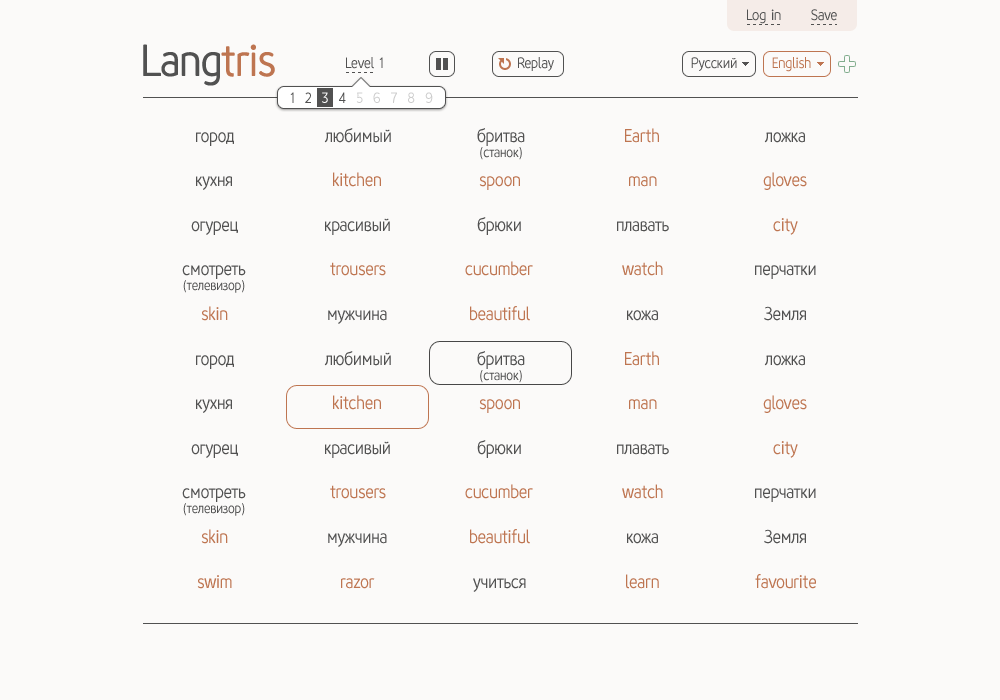
<style>
.page{position:relative;width:1000px;height:700px;background:#fbfaf9}
.page>*{position:absolute;margin:0}
.t1{font:17px "flexy";letter-spacing:-0.015em;color:#515151;scale:0.95 1}
.t2{font:51px "flexy";letter-spacing:-0.015em;color:#515151;scale:0.95 1}
.t3{font:51px "flexy";letter-spacing:-0.015em;color:#be7551;scale:0.95 1}
.t4{font:17px "flexy";letter-spacing:-0.015em;color:#be7551;scale:0.95 1}
.t5{font:21px "flexy";letter-spacing:-0.015em;color:#515151;scale:0.95 1}
.t6{font:16px/15px "flexy";letter-spacing:-0.015em;color:#515151;scale:0.95 1}
.t7{font:21px/25px "flexy";letter-spacing:-0.015em;color:#515151;scale:0.95 1}
.t8{font:21px "flexy";letter-spacing:-0.015em;color:#be7551;scale:0.95 1}
</style>
<div class="page">
<p class="t1" style="left:747px;top:9px;width:90px;height:15px">Log in      Save</p>
<p class="t2" style="left:143px;top:44px;width:132px;height:42px">Lang<span class="t3">tris</span></p>
<p class="t1" style="left:346px;top:57px;width:37px;height:12px">Level 1</p>
<p class="t1" style="left:518px;top:57px;width:36px;height:14px">Replay</p>
<p class="t1" style="left:691px;top:57px;width:120px;height:15px">Русский  <span class="t4">     English</span></p>
<p class="t5" style="left:196px;top:132px;width:38px;height:14px">город</p>
<p class="t5" style="left:324px;top:128px;width:67px;height:15px">любимый</p>
<p class="t6" style="left:477px;top:128px;width:48px;height:32px;text-align:center"><span class="t7">бритва<br></span>(станок)</p>
<p class="t8" style="left:625px;top:128px;width:34px;height:15px">Earth</p>
<p class="t5" style="left:764px;top:132px;width:41px;height:11px">ложка</p>
<p class="t8" style="left:333px;top:172px;width:48px;height:15px">kitchen</p>
<p class="t8" style="left:763px;top:172px;width:44px;height:18px">gloves</p>
<p class="t5" style="left:196px;top:176px;width:36px;height:14px">кухня</p>
<p class="t8" style="left:479px;top:176px;width:41px;height:14px">spoon</p>
<p class="t8" style="left:629px;top:176px;width:28px;height:11px">man</p>
<p class="t5" style="left:191px;top:221px;width:47px;height:14px">огурец</p>
<p class="t5" style="left:325px;top:218px;width:65px;height:17px">красивый</p>
<p class="t5" style="left:477px;top:217px;width:44px;height:18px">брюки</p>
<p class="t5" style="left:617px;top:221px;width:52px;height:11px">плавать</p>
<p class="t8" style="left:773px;top:218px;width:25px;height:17px">city</p>
<p class="t6" style="left:182px;top:265px;width:64px;height:28px;text-align:center"><span class="t7">смотреть<br></span>(телевизор)</p>
<p class="t8" style="left:330px;top:262px;width:56px;height:14px">trousers</p>
<p class="t8" style="left:465px;top:261px;width:68px;height:15px">cucumber</p>
<p class="t8" style="left:622px;top:261px;width:41px;height:15px">watch</p>
<p class="t5" style="left:755px;top:265px;width:61px;height:14px">перчатки</p>
<p class="t8" style="left:201px;top:306px;width:27px;height:15px">skin</p>
<p class="t5" style="left:328px;top:310px;width:59px;height:14px">мужчина</p>
<p class="t8" style="left:470px;top:306px;width:60px;height:15px">beautiful</p>
<p class="t5" style="left:627px;top:310px;width:31px;height:11px">кожа</p>
<p class="t5" style="left:764px;top:306px;width:42px;height:15px">Земля</p>
<p class="t5" style="left:324px;top:351px;width:67px;height:15px">любимый</p>
<p class="t6" style="left:477px;top:351px;width:48px;height:32px;text-align:center"><span class="t7">бритва<br></span>(станок)</p>
<p class="t8" style="left:625px;top:351px;width:34px;height:15px">Earth</p>
<p class="t5" style="left:196px;top:355px;width:38px;height:14px">город</p>
<p class="t5" style="left:764px;top:355px;width:41px;height:11px">ложка</p>
<p class="t5" style="left:196px;top:399px;width:36px;height:14px">кухня</p>
<p class="t8" style="left:333px;top:395px;width:48px;height:15px">kitchen</p>
<p class="t8" style="left:479px;top:399px;width:41px;height:14px">spoon</p>
<p class="t8" style="left:629px;top:399px;width:28px;height:11px">man</p>
<p class="t8" style="left:763px;top:395px;width:44px;height:18px">gloves</p>
<p class="t5" style="left:191px;top:444px;width:47px;height:14px">огурец</p>
<p class="t5" style="left:325px;top:441px;width:65px;height:17px">красивый</p>
<p class="t5" style="left:477px;top:440px;width:44px;height:18px">брюки</p>
<p class="t5" style="left:617px;top:444px;width:52px;height:11px">плавать</p>
<p class="t8" style="left:773px;top:441px;width:25px;height:17px">city</p>
<p class="t8" style="left:330px;top:485px;width:56px;height:14px">trousers</p>
<p class="t8" style="left:465px;top:484px;width:68px;height:15px">cucumber</p>
<p class="t8" style="left:622px;top:484px;width:41px;height:15px">watch</p>
<p class="t6" style="left:182px;top:488px;width:64px;height:28px;text-align:center"><span class="t7">смотреть<br></span>(телевизор)</p>
<p class="t5" style="left:755px;top:488px;width:61px;height:14px">перчатки</p>
<p class="t8" style="left:201px;top:529px;width:27px;height:15px">skin</p>
<p class="t5" style="left:328px;top:533px;width:59px;height:14px">мужчина</p>
<p class="t8" style="left:470px;top:529px;width:60px;height:15px">beautiful</p>
<p class="t5" style="left:627px;top:533px;width:31px;height:11px">кожа</p>
<p class="t5" style="left:764px;top:529px;width:42px;height:15px">Земля</p>
<p class="t8" style="left:197px;top:575px;width:35px;height:14px">swim</p>
<p class="t8" style="left:341px;top:578px;width:34px;height:11px">razor</p>
<p class="t5" style="left:473px;top:578px;width:53px;height:14px">учиться</p>
<p class="t8" style="left:626px;top:574px;width:33px;height:15px">learn</p>
<p class="t8" style="left:755px;top:574px;width:61px;height:15px">favourite</p>
</div>
